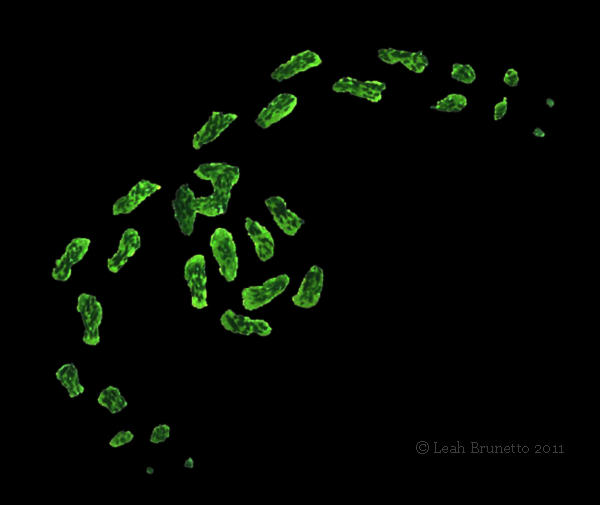
<style>
.page{position:relative;width:600px;height:505px;background:#010000}
.page>*{position:absolute;margin:0}
.t1{font:15.3px "Georgia";color:#3e3d3c}
</style>
<div class="page">
<p class="t1" style="left:416px;top:441px;width:148px;height:13px">© Leah Brunetto 2011</p>
</div>
